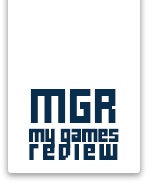
<style>
.page{position:relative;width:150px;height:183px;background:#ffffff}
.page>*{position:absolute;margin:0}
.t1{font:27.3px "FFFForward";letter-spacing:0.05em;color:#092e4d}
.t2{font:15.2px/18.2px "FFFForward";letter-spacing:-0.05em;color:#092e4d}
.t3{font:18.2px/18.2px "FFFForward";letter-spacing:0.12em;color:#092e4d}
</style>
<div class="page">
<p class="t1" style="left:30px;top:89px;width:86px;height:34px">MGR</p>
<p class="t2" style="left:29px;top:128px;width:90px;height:32px;text-align:center">my games<br><span class="t3">review</span></p>
</div>
